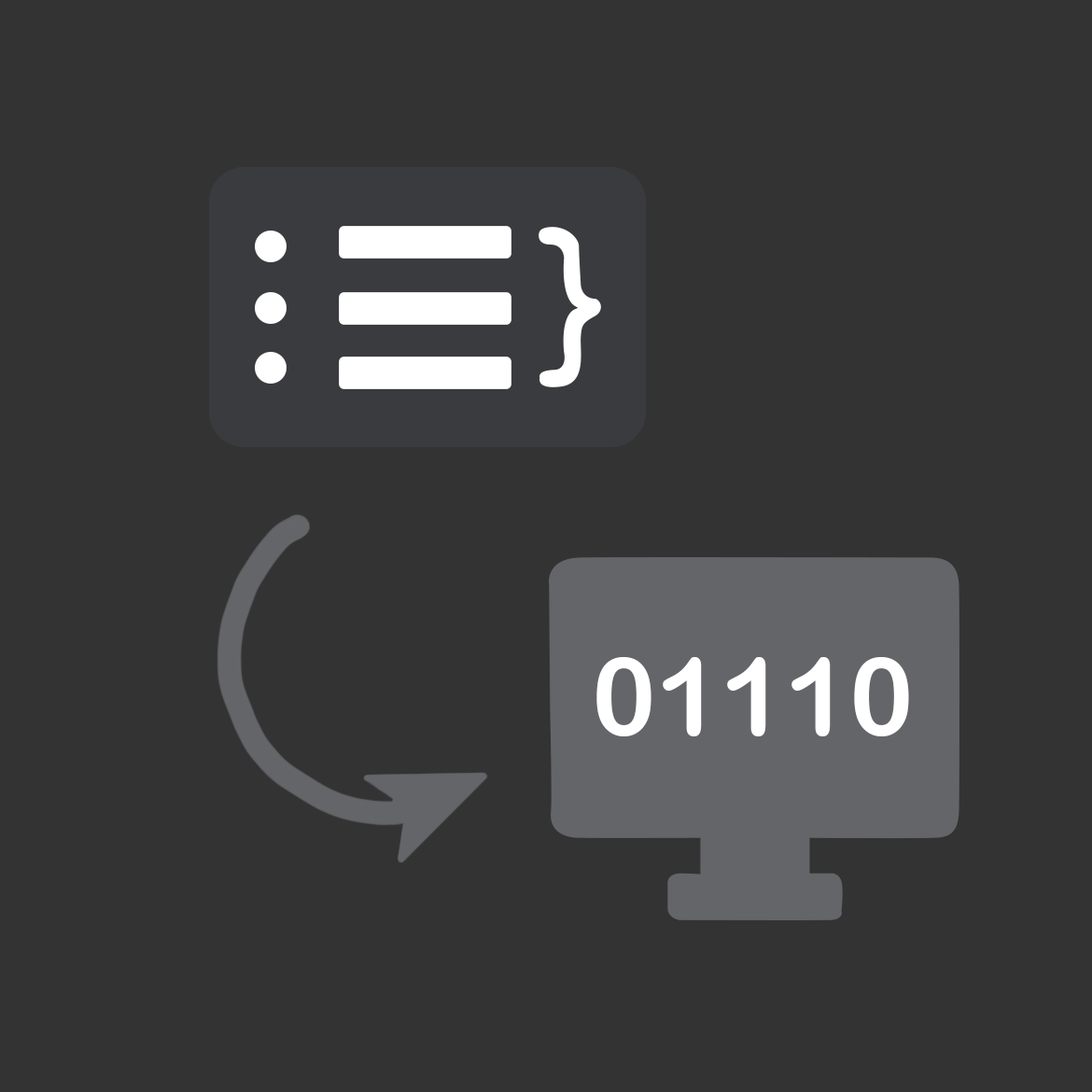
<style>
.page{position:relative;width:1092px;height:1092px;background:#333333}
.page>*{position:absolute;margin:0}
.t1{font:108.3px "ArialRoundedMTBold";color:#ffffff}
</style>
<div class="page">
<p class="t1" style="left:596px;top:657px;width:313px;height:79px">01110</p>
</div>
